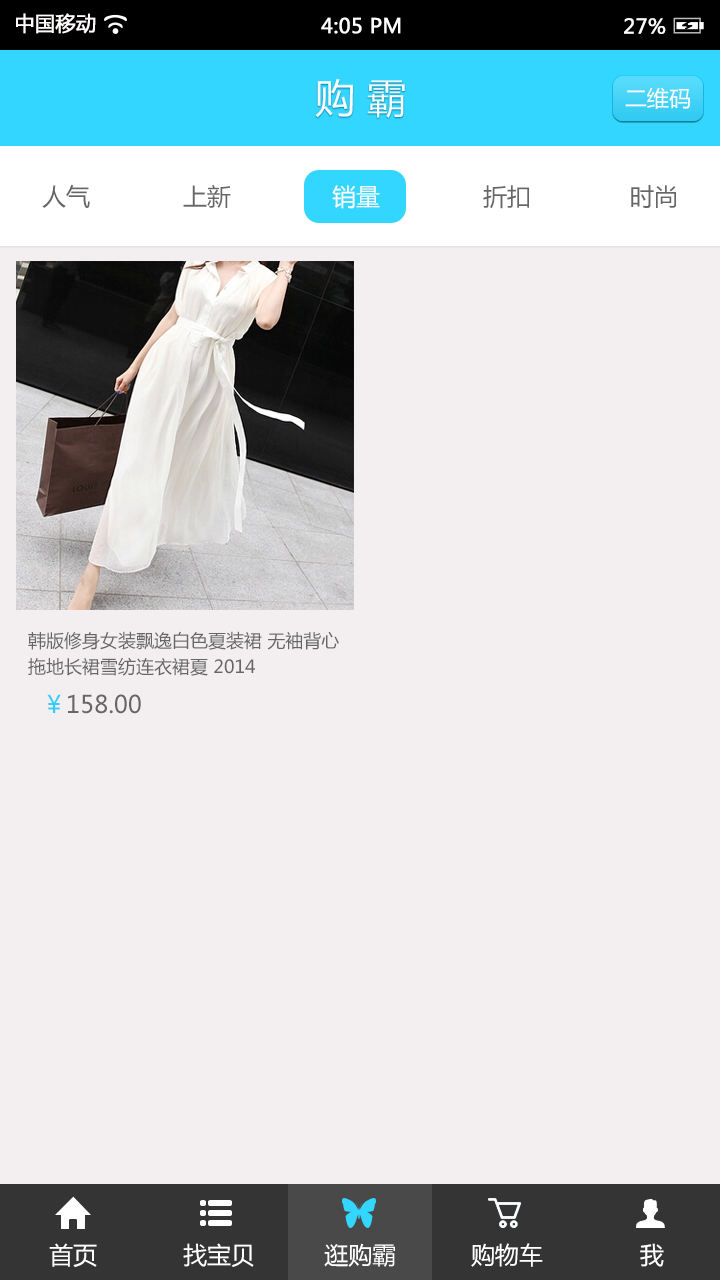
<style>
.page{position:relative;width:720px;height:1280px;background:#f3eff0}
.page>*{position:absolute;margin:0}
.t1{font:20px "MicrosoftYaHei";color:#fffcfc;font-weight:bold}
.t2{font:20px "MicrosoftYaHei";color:#ffffff;font-weight:bold}
.t3{font:20px "MicrosoftYaHei";color:#fffefe;font-weight:bold}
.t4{font:40px "MicrosoftYaHei";color:#ffffff}
.t5{font:22px "MicrosoftYaHei";color:#ffffff}
.t6{font:24px "MicrosoftYaHei";color:#666666}
.t7{font:24px "MicrosoftYaHei";color:#ffffff}
.t8{font:18px/26px "MicrosoftYaHei";color:#666666}
.t9{font:24px "MicrosoftYaHei";color:#33ccff}
</style>
<div class="page">
<p class="t1" style="left:16px;top:13px;width:80px;height:21px">中国移动</p>
<p class="t2" style="left:321px;top:17px;width:80px;height:17px">4:05 PM</p>
<p class="t3" style="left:624px;top:18px;width:42px;height:16px">27%</p>
<p class="t4" style="left:315px;top:78px;width:90px;height:40px">购 霸</p>
<p class="t5" style="left:625px;top:87px;width:65px;height:22px">二维码</p>
<p class="t6" style="left:42px;top:184px;width:48px;height:24px">人气</p>
<p class="t6" style="left:183px;top:184px;width:48px;height:24px">上新</p>
<p class="t7" style="left:332px;top:185px;width:48px;height:24px">销量</p>
<p class="t6" style="left:483px;top:185px;width:46px;height:24px">折扣</p>
<p class="t6" style="left:631px;top:185px;width:45px;height:23px">时尚</p>
<p class="t8" style="left:28px;top:631px;width:311px;height:45px">韩版修身女装飘逸白色夏装裙 无袖背心<br>拖地长裙雪纺连衣裙夏 2014</p>
<p class="t6" style="left:47px;top:694px;width:94px;height:20px"><span class="t9">￥</span>158.00</p>
<p class="t7" style="left:49px;top:1243px;width:48px;height:24px">首页</p>
<p class="t7" style="left:183px;top:1243px;width:71px;height:24px">找宝贝</p>
<p class="t7" style="left:324px;top:1243px;width:71px;height:24px">逛购霸</p>
<p class="t7" style="left:471px;top:1243px;width:72px;height:24px">购物车</p>
<p class="t7" style="left:640px;top:1243px;width:24px;height:24px">我</p>
</div>
